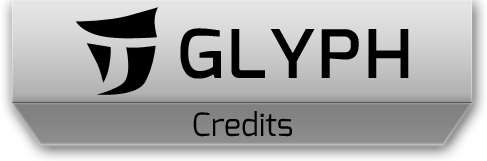
<style>
.page{position:relative;width:487px;height:161px}
.page>*{position:absolute;margin:0}
.t1{font:85.8px "Exo-Medium";color:#000000;font-variant:small-caps}
.t2{font:32px "Exo-Regular";color:#000000}
</style>
<div class="page">
<p class="t1" style="left:180px;top:28px;width:229px;height:51px">glyph</p>
<p class="t2" style="left:193px;top:111px;width:99px;height:26px">Credits</p>
</div>
